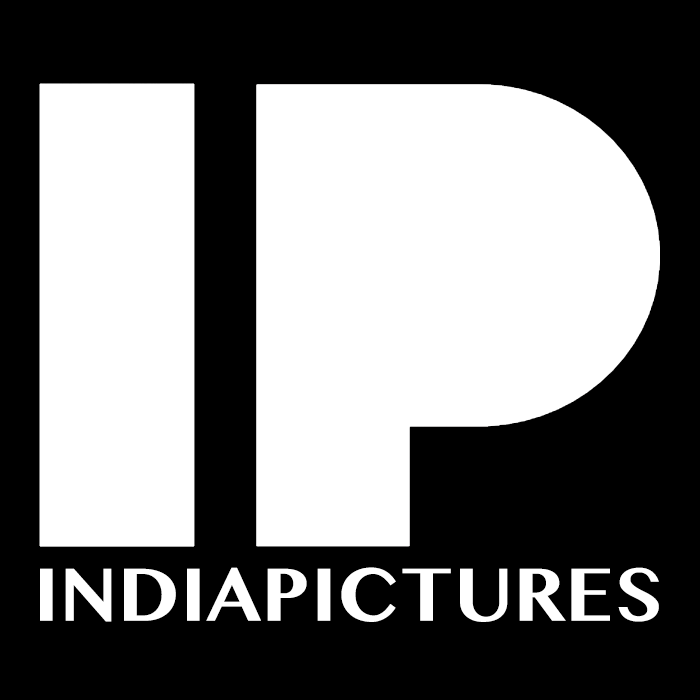
<style>
.page{position:relative;width:700px;height:700px;background:#000000}
.page>*{position:absolute;margin:0}
.t1{font:74.7px "GurmukhiMN-Bold";color:#ffffff}
</style>
<div class="page">
<p class="t1" style="left:40px;top:567px;width:619px;height:55px">INDIAPICTURES</p>
</div>
